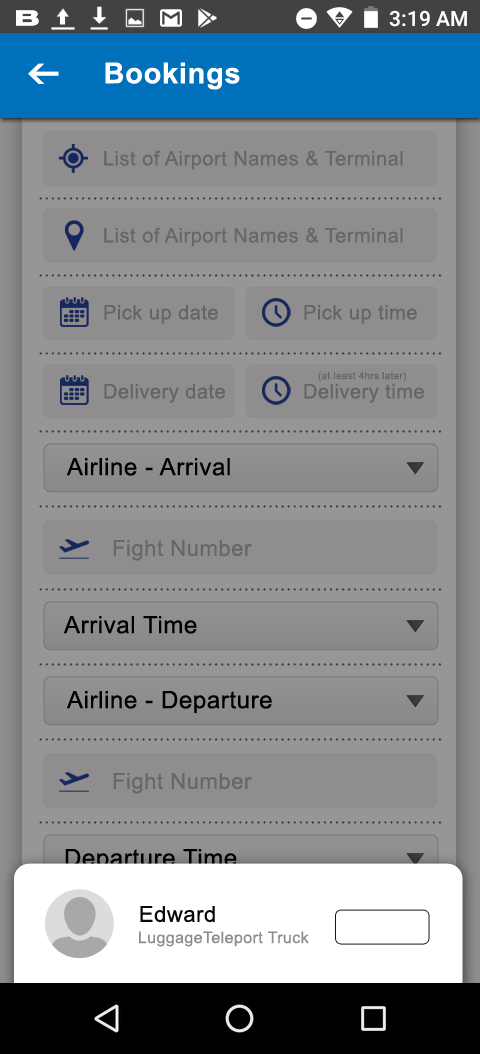
<style>
.page{position:relative;width:480px;height:1054px;background:#969696}
.page>*{position:absolute;margin:0}
.t1{font:29px "Arial-BoldMT";letter-spacing:0.025em;color:#ffffff}
.t2{font:20px "ArialMT";letter-spacing:0.025em;color:#676767}
.t3{font:20px "ArialMT";letter-spacing:0.025em;color:#646464}
.t4{font:10px "ArialMT";letter-spacing:0.025em;color:#646464}
.t5{font:24px "ArialMT";letter-spacing:0.025em;color:#000000}
.t6{font:22px "ArialMT";letter-spacing:0.025em;color:#676767}
.t7{font:22px "ArialMT";letter-spacing:0.025em;color:#060a0a}
.t8{font:16px "ArialMT";letter-spacing:0.025em;color:#8b8d8d}
</style>
<div class="page">
<p class="t1" style="left:105px;top:62px;width:135px;height:28px">Bookings</p>
<p class="t2" style="left:104px;top:150px;width:299px;height:20px">List of Airport Names &amp; Terminal</p>
<p class="t2" style="left:104px;top:227px;width:299px;height:20px">List of Airport Names &amp; Terminal</p>
<p class="t3" style="left:104px;top:305px;width:114px;height:19px">Pick up date</p>
<p class="t3" style="left:304px;top:305px;width:113px;height:19px">Pick up time</p>
<p class="t4" style="left:318px;top:371px;width:89px;height:11px">(at least 4hrs later)</p>
<p class="t3" style="left:104px;top:384px;width:121px;height:19px">Delivery date</p>
<p class="t3" style="left:304px;top:384px;width:120px;height:19px">Delivery time</p>
<p class="t5" style="left:66px;top:458px;width:164px;height:18px">Airline - Arrival</p>
<p class="t6" style="left:113px;top:540px;width:139px;height:21px">Fight Number</p>
<p class="t5" style="left:63px;top:616px;width:134px;height:18px">Arrival Time</p>
<p class="t5" style="left:66px;top:691px;width:206px;height:22px">Airline - Departure</p>
<p class="t6" style="left:113px;top:773px;width:139px;height:21px">Fight Number</p>
<p class="t5" style="left:65px;top:849px;width:172px;height:22px">Departure Time</p>
<p class="t7" style="left:140px;top:906px;width:75px;height:17px">Edward</p>
<p class="t8" style="left:139px;top:931px;width:170px;height:16px">LuggageTeleport Truck</p>
</div>
